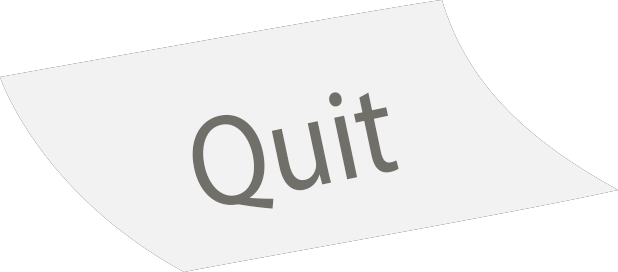
<style>
.page{position:relative;width:618px;height:272px;background:#f2f2f2}
.page>*{position:absolute;margin:0}
.t1{font:129.8px "MyriadPro-Regular";color:#706f69;scale:0.88 1}
</style>
<div class="page">
<p class="t1" style="left:192px;top:92px;width:207px;height:117px;rotate:-12deg">Quit</p>
<p class="t1" style="left:192px;top:92px;width:207px;height:117px;rotate:-12deg">Quit</p>
</div>
